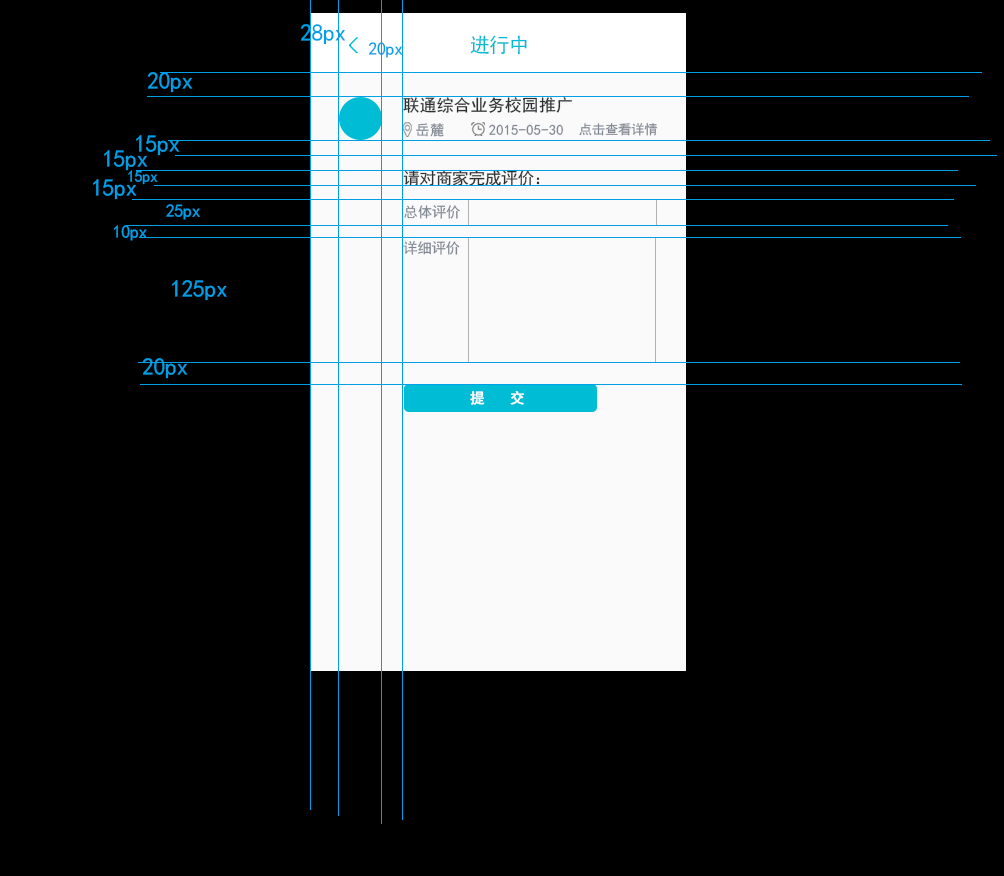
<style>
.page{position:relative;width:1004px;height:876px;background:#000000}
.page>*{position:absolute;margin:0}
.t1{font:24px "SimHei";letter-spacing:-0.02em;color:#00a0e9}
.t2{font:20px "SimHei";letter-spacing:-0.02em;color:#00bcd4}
.t3{font:18px "SimHei";letter-spacing:-0.02em;color:#00a0e9}
.t4{font:16.7px "SimHei";letter-spacing:0.02em;color:#2e3031}
.t5{font:14.5px "SimHei";letter-spacing:0.02em;color:#808792}
.t6{font:13.3px "SimHei";letter-spacing:-0.02em;color:#808792}
.t7{font:16px "SimHei";letter-spacing:-0.02em;color:#00a0e9}
.t8{font:16.7px "SimHei";letter-spacing:-0.02em;color:#2e3031}
.t9{font:14.5px "SimHei";letter-spacing:-0.02em;color:#808792}
.t10{font:14.5px "SimHei";letter-spacing:0.02em;color:#ffffff;font-weight:bold}
</style>
<div class="page">
<p class="t1" style="left:300px;top:24px;width:46px;height:21px">28px</p>
<p class="t2" style="left:470px;top:35px;width:57px;height:20px">进行中</p>
<p class="t3" style="left:368px;top:42px;width:35px;height:16px">20px</p>
<p class="t1" style="left:147px;top:72px;width:46px;height:21px">20px</p>
<p class="t4" style="left:403px;top:97px;width:169px;height:16px">联通综合业务校园推广</p>
<p class="t5" style="left:416px;top:123px;width:28px;height:14px">岳麓</p>
<p class="t5" style="left:489px;top:124px;width:74px;height:11px">2015-05-30</p>
<p class="t6" style="left:579px;top:123px;width:79px;height:13px">点击查看详情</p>
<p class="t1" style="left:136px;top:135px;width:44px;height:21px">15px</p>
<p class="t1" style="left:104px;top:150px;width:44px;height:21px">15px</p>
<p class="t7" style="left:128px;top:170px;width:30px;height:15px">15px</p>
<p class="t8" style="left:403px;top:170px;width:137px;height:16px">请对商家完成评价：</p>
<p class="t1" style="left:93px;top:179px;width:44px;height:21px">15px</p>
<p class="t3" style="left:166px;top:204px;width:34px;height:16px">25px</p>
<p class="t9" style="left:404px;top:205px;width:56px;height:14px">总体评价</p>
<p class="t3" style="left:113px;top:225px;width:34px;height:16px">10px</p>
<p class="t9" style="left:403px;top:241px;width:57px;height:14px">详细评价</p>
<p class="t1" style="left:172px;top:280px;width:55px;height:21px">125px</p>
<p class="t1" style="left:142px;top:358px;width:46px;height:21px">20px</p>
<p class="t10" style="left:470px;top:391px;width:54px;height:14px">提  交</p>
</div>
